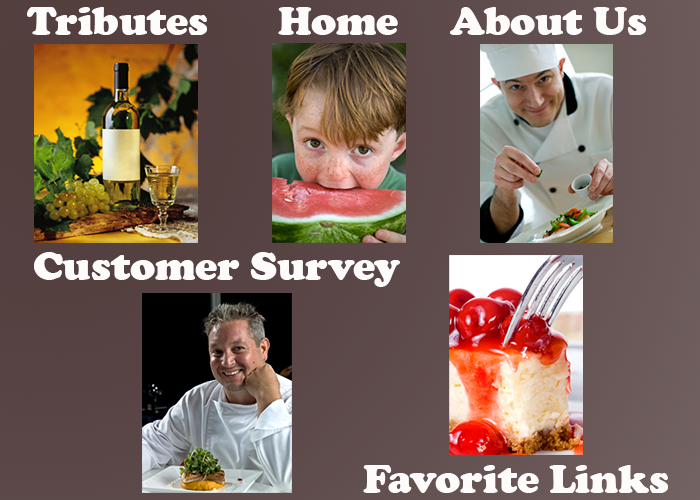
<style>
.page{position:relative;width:700px;height:500px}
.page>*{position:absolute;margin:0}
.t1{font:41.7px "CooperBlack";color:#fefbfb}
</style>
<div class="page">
<p class="t1" style="left:27px;top:7px;width:180px;height:28px">Tributes</p>
<p class="t1" style="left:278px;top:7px;width:120px;height:28px">Home</p>
<p class="t1" style="left:450px;top:7px;width:196px;height:28px">About Us</p>
<p class="t1" style="left:34px;top:252px;width:366px;height:35px">Customer Survey</p>
<p class="t1" style="left:363px;top:465px;width:305px;height:28px">Favorite Links</p>
</div>
